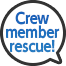
<style>
.page{position:relative;width:66px;height:66px;background:#ffffff}
.page>*{position:absolute;margin:0}
.t1{font:15px/14px "UDShinGoPro-Bold";letter-spacing:-0.04em;color:#1c68bb;scale:0.9 1}
</style>
<div class="page">
<p class="t1" style="left:6px;top:11px;width:54px;height:42px;text-align:center">Crew<br>member<br>rescue!</p>
</div>
